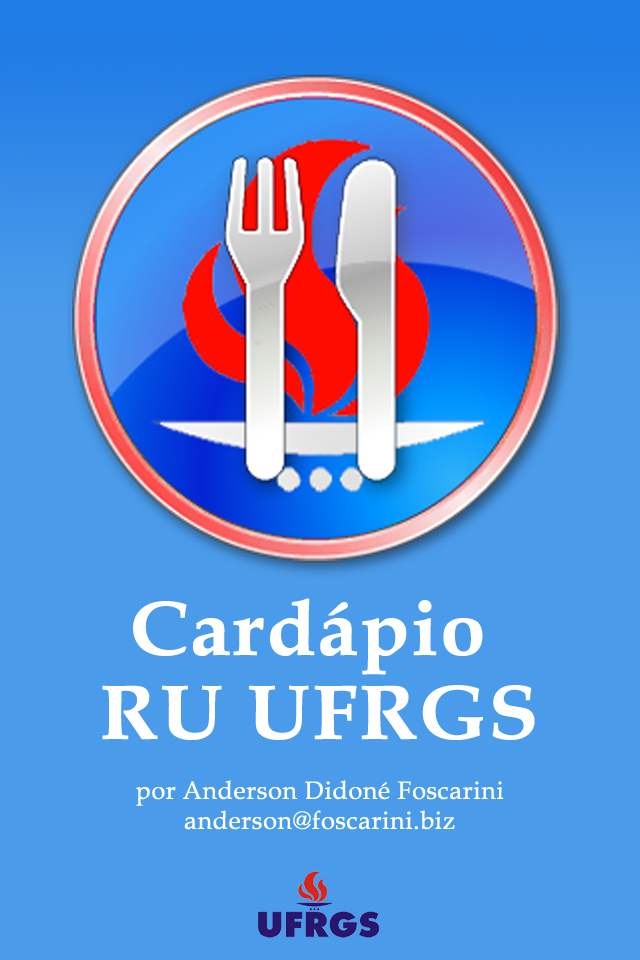
<style>
.page{position:relative;width:640px;height:960px;background:#4a9bea}
.page>*{position:absolute;margin:0}
.t1{font:77px "BookAntiqua-Bold";color:#ffffff;font-weight:bold;scale:1.05 1}
.t2{font:25px "BookAntiqua";color:#ffffff;font-weight:bold}
</style>
<div class="page">
<p class="t1" style="left:102px;top:598px;width:433px;height:142px;text-align:center">Cardápio <br>RU UFRGS</p>
<p class="t2" style="left:136px;top:780px;width:368px;height:50px;text-align:center">por Anderson Didoné Foscarini<br>anderson@foscarini.biz</p>
</div>
